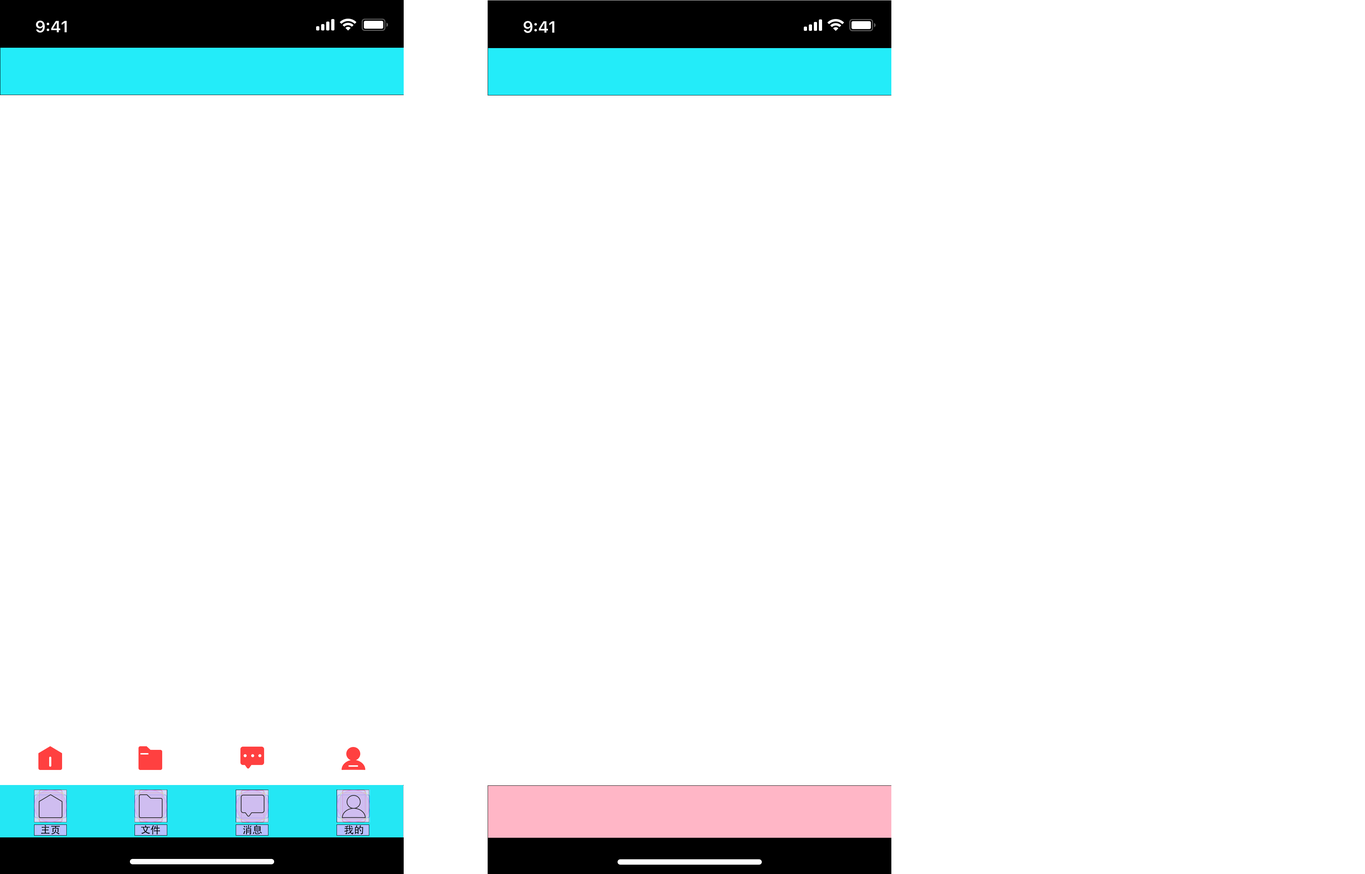
<style>
.page{position:relative;width:1365px;height:874px;background:#ffffff}
.page>*{position:absolute;margin:0}
.t1{font:10px "AdobeHeitiStd-Regular";color:#000000}
</style>
<div class="page">
<p class="t1" style="left:41px;top:825px;width:19px;height:9px">主页</p>
<p class="t1" style="left:141px;top:825px;width:19px;height:9px">文件</p>
<p class="t1" style="left:243px;top:825px;width:19px;height:9px">消息</p>
<p class="t1" style="left:344px;top:825px;width:19px;height:9px">我的</p>
</div>
